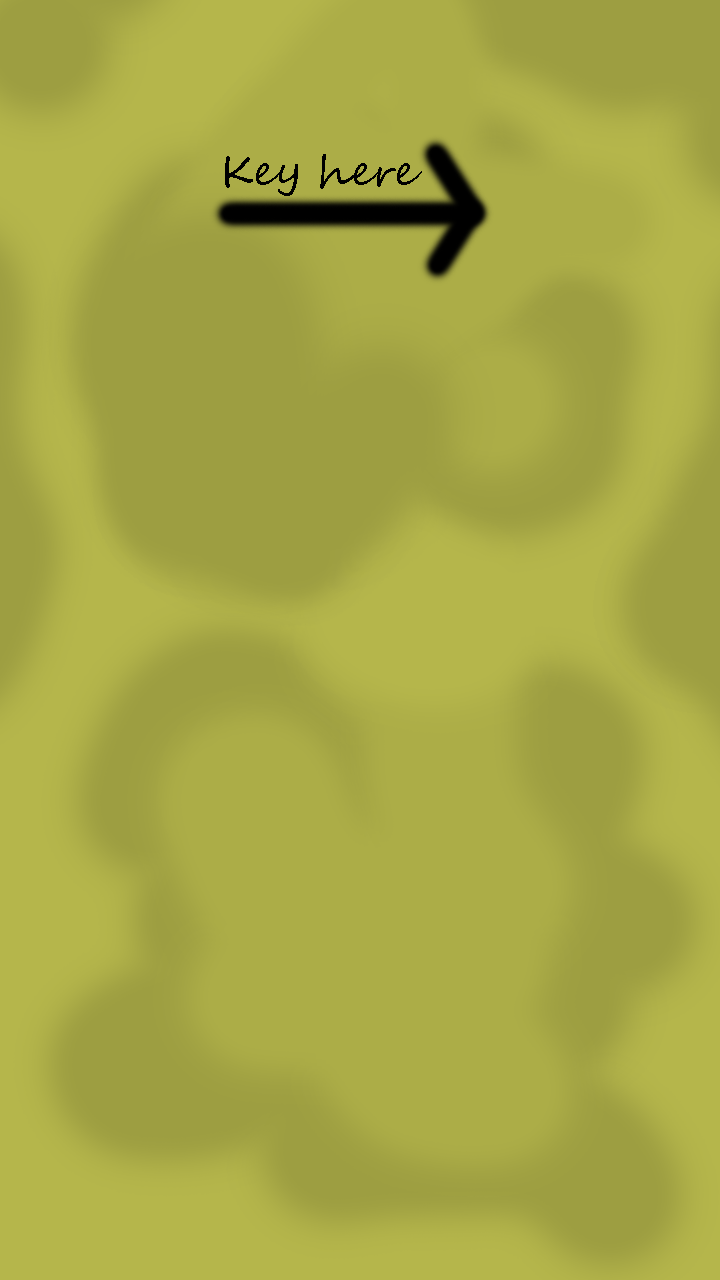
<style>
.page{position:relative;width:720px;height:1280px}
.page>*{position:absolute;margin:0}
.t1{font:41.7px "SegoeScript";color:#000000}
</style>
<div class="page">
<p class="t1" style="left:225px;top:154px;width:197px;height:42px">Key here</p>
</div>
